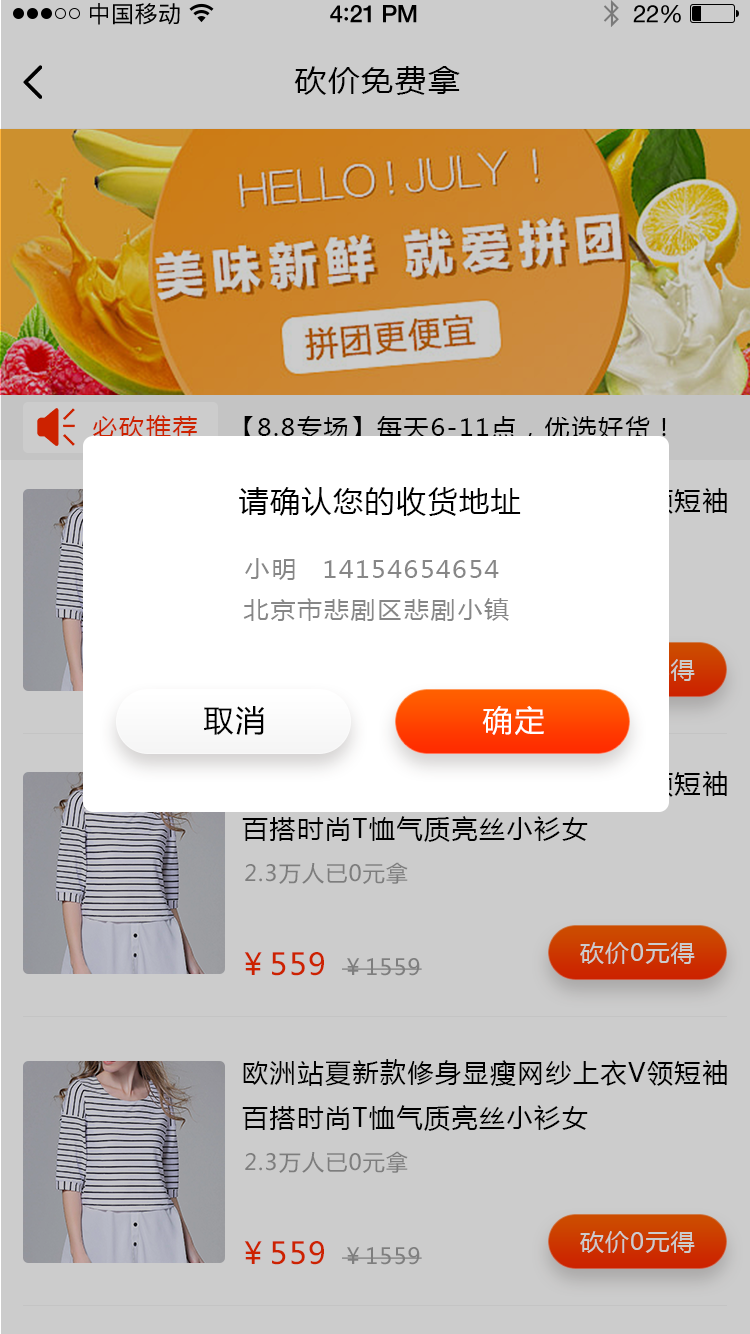
<style>
.page{position:relative;width:750px;height:1334px;background:#cccccc}
.page>*{position:absolute;margin:0}
.t1{font:23px "PingFangSC-Regular";letter-spacing:0.02em;color:#000000}
.t2{font:24px "HelveticaNeue-Medium";letter-spacing:-0.02em;color:#000000}
.t3{font:26px "Avenir-Medium";letter-spacing:-0.02em;color:#000000}
.t4{font:24px "HelveticaNeue";letter-spacing:-0.02em;color:#000000}
.t5{font:30px "MicrosoftYaHei";letter-spacing:0.05em;color:#000000;scale:1.06 1}
.t6{font:24px "MicrosoftYaHei";letter-spacing:0.05em;color:#cc2200;scale:1.06 1}
.t7{font:24px "MicrosoftYaHei";letter-spacing:0.05em;color:#000000;scale:1.06 1}
.t8{font:30px "MicrosoftYaHei";letter-spacing:0.05em;color:#000000;text-transform:uppercase}
.t9{font:24px "MicrosoftYaHei";letter-spacing:0.05em;color:#878787;scale:1.06 1}
.t10{font:30px "MicrosoftYaHei";letter-spacing:0.05em;color:#ffffff;text-transform:uppercase}
.t11{font:26px "MicrosoftYaHei";letter-spacing:0.06em;text-transform:uppercase}
.t12{font:22px "MicrosoftYaHei";letter-spacing:0.05em;color:#7d7d7d;text-transform:uppercase}
.t13{font:24px "MicrosoftYaHei";letter-spacing:0.05em;color:#cccccc;text-transform:uppercase}
.t14{font:30px "MicrosoftYaHei";letter-spacing:0.05em;color:#cc2200;text-transform:uppercase}
.t15{font:22px "MicrosoftYaHei";letter-spacing:0.05em;color:#7e7e7e;text-transform:uppercase}
.t16{font:26px "MicrosoftYaHei";letter-spacing:0.06em;color:#000000;text-transform:uppercase}
</style>
<div class="page">
<p class="t1" style="left:90px;top:3px;width:90px;height:22px">中国移动</p>
<p class="t2" style="left:330px;top:5px;width:87px;height:18px">4<span class="t3">:</span>21 PM</p>
<p class="t4" style="left:633px;top:5px;width:48px;height:18px">22%</p>
<p class="t5" style="left:294px;top:66px;width:166px;height:29px">砍价免费拿</p>
<p class="t6" style="left:93px;top:415px;width:104px;height:23px">必砍推荐</p>
<p class="t7" style="left:244px;top:416px;width:422px;height:24px">【8.8专场】每天6-11点，优选好货！</p>
<p class="t8" style="left:239px;top:487px;width:282px;height:29px">请确认您的收货地址</p>
<p class="t9" style="left:245px;top:558px;width:50px;height:22px">小明</p>
<p class="t9" style="left:324px;top:560px;width:175px;height:18px">14154654654</p>
<p class="t9" style="left:243px;top:598px;width:266px;height:23px">北京市悲剧区悲剧小镇</p>
<p class="t8" style="left:204px;top:706px;width:60px;height:29px">取消</p>
<p class="t10" style="left:482px;top:706px;width:62px;height:29px">确定</p>
<p class="t11" style="left:242px;top:770px;width:485px;height:72px">欧洲站夏新款修身显瘦网纱上衣v领短袖百搭时尚t恤气质亮丝小衫女</p>
<p class="t12" style="left:245px;top:862px;width:163px;height:22px">2.3万人已0元拿</p>
<p class="t13" style="left:580px;top:942px;width:115px;height:22px">砍价0元得</p>
<p class="t14" style="left:244px;top:952px;width:80px;height:24px">￥559</p>
<p class="t15" style="left:342px;top:958px;width:80px;height:18px">￥1559</p>
<p class="t16" style="left:242px;top:1059px;width:485px;height:72px">欧洲站夏新款修身显瘦网纱上衣v领短袖百搭时尚t恤气质亮丝小衫女</p>
<p class="t12" style="left:245px;top:1151px;width:163px;height:22px">2.3万人已0元拿</p>
<p class="t14" style="left:244px;top:1241px;width:80px;height:24px">￥559</p>
<p class="t13" style="left:580px;top:1231px;width:115px;height:22px">砍价0元得</p>
<p class="t15" style="left:342px;top:1247px;width:80px;height:18px">￥1559</p>
</div>
